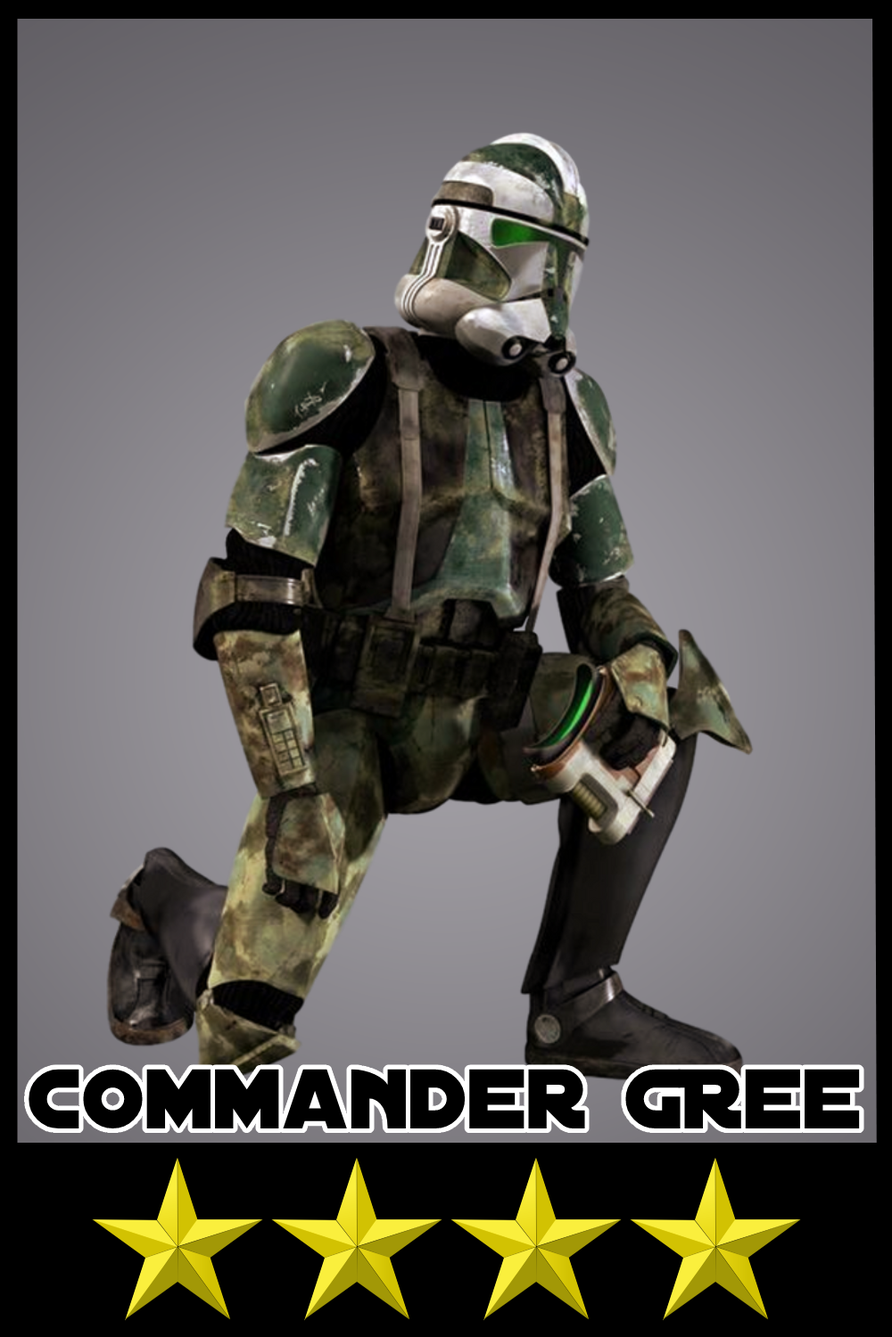
<style>
.page{position:relative;width:892px;height:1337px}
.page>*{position:absolute;margin:0}
.t1{font:90.8px "DistantGalaxy";color:#000000}
</style>
<div class="page">
<p class="t1" style="left:29px;top:1069px;width:831px;height:60px">Commander GRee</p>
</div>
